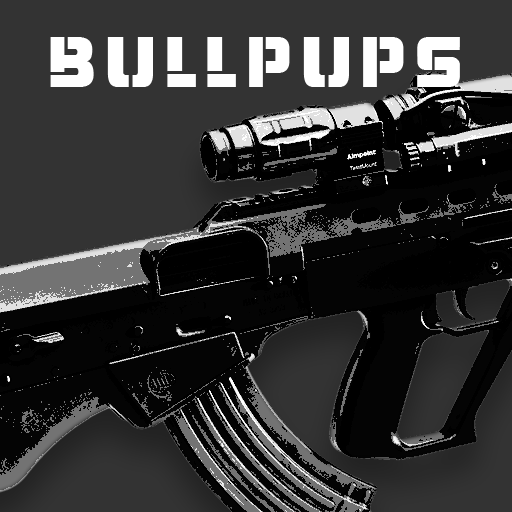
<style>
.page{position:relative;width:512px;height:512px;background:#333333}
.page>*{position:absolute;margin:0}
.t1{font:72px "Normandia-Regular";letter-spacing:0.1em;color:#ffffff}
</style>
<div class="page">
<p class="t1" style="left:50px;top:37px;width:410px;height:50px">Bullpups</p>
</div>
